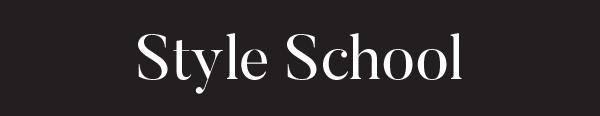
<style>
.page{position:relative;width:600px;height:116px;background:#231f20}
.page>*{position:absolute;margin:0}
.t1{font:62.4px "Butler";color:#ffffff}
</style>
<div class="page">
<p class="t1" style="left:138px;top:33px;width:324px;height:61px">Style School</p>
</div>
